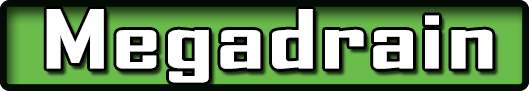
<style>
.page{position:relative;width:529px;height:91px;background:#ffffff}
.page>*{position:absolute;margin:0}
.t1{font:77.6px "AgencyFB-Bold";letter-spacing:0.02em;color:#ffffff;scale:1.59 1}
</style>
<div class="page">
<p class="t1" style="left:46px;top:9px;width:447px;height:74px">Megadrain</p>
</div>
